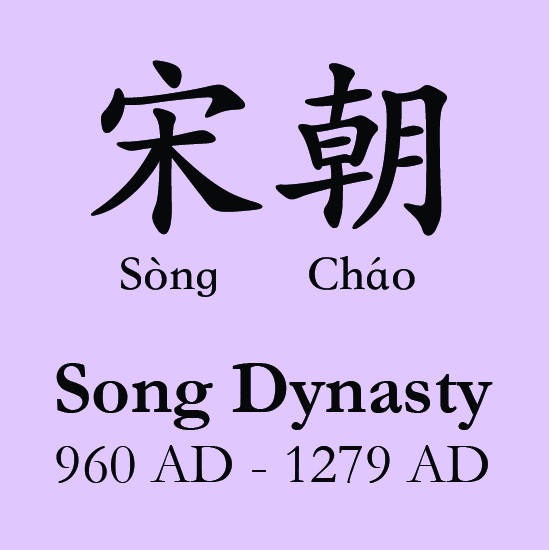
<style>
.page{position:relative;width:549px;height:550px;background:#e0c7ff}
.page>*{position:absolute;margin:0}
.t1{font:200px "STKaiti-SC-Bold";color:#070809}
.t2{font:50px "STKaiti-SC-Bold";color:#070809}
.t3{font:58.3px "Garamond";color:#070809}
.t4{font:75px "Garamond-Bold";color:#070809}
</style>
<div class="page">
<p class="t1" style="left:91px;top:60px;width:356px;height:176px">宋朝</p>
<p class="t2" style="left:121px;top:256px;width:294px;height:41px">Sòng       Cháo</p>
<p class="t3" style="left:56px;top:363px;width:437px;height:120px;text-align:center"><span class="t4">Song Dynasty<br></span>960 AD - 1279 AD</p>
</div>
